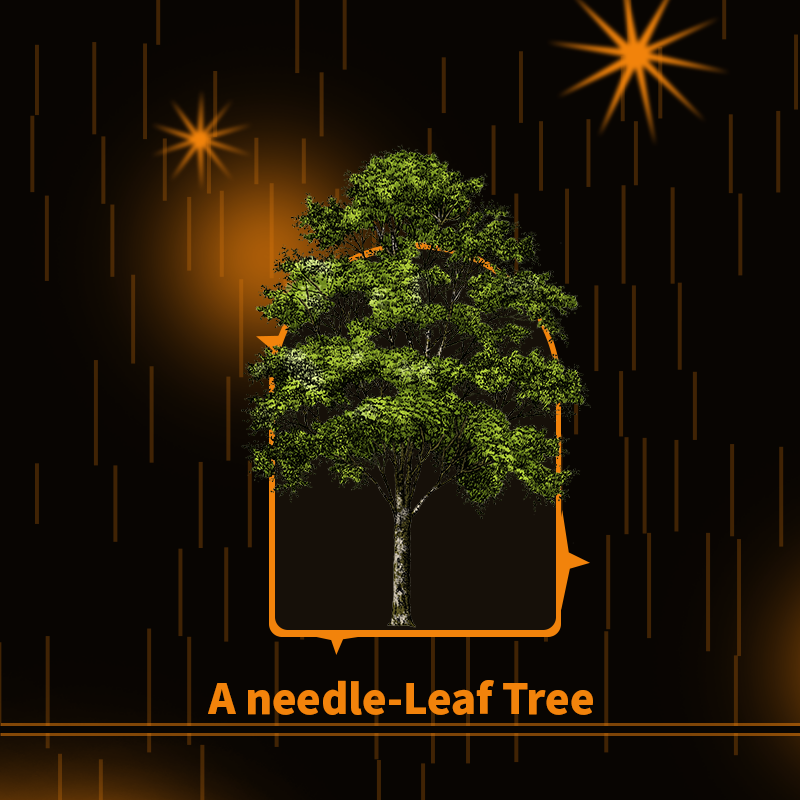
<style>
.page{position:relative;width:800px;height:800px;background:#080502}
.page>*{position:absolute;margin:0}
.t1{font:41.3px "NotoSansKR-Black";color:#f2830b}
</style>
<div class="page">
<p class="t1" style="left:208px;top:680px;width:385px;height:35px">A needle-Leaf Tree</p>
</div>
